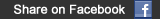
<style>
.page{position:relative;width:160px;height:19px;background:#333333}
.page>*{position:absolute;margin:0}
.t1{font:12px "ArialMT";letter-spacing:0.005em;color:#ffffff;font-weight:bold}
</style>
<div class="page">
<p class="t1" style="left:14px;top:4px;width:111px;height:10px">Share on Facebook</p>
</div>
